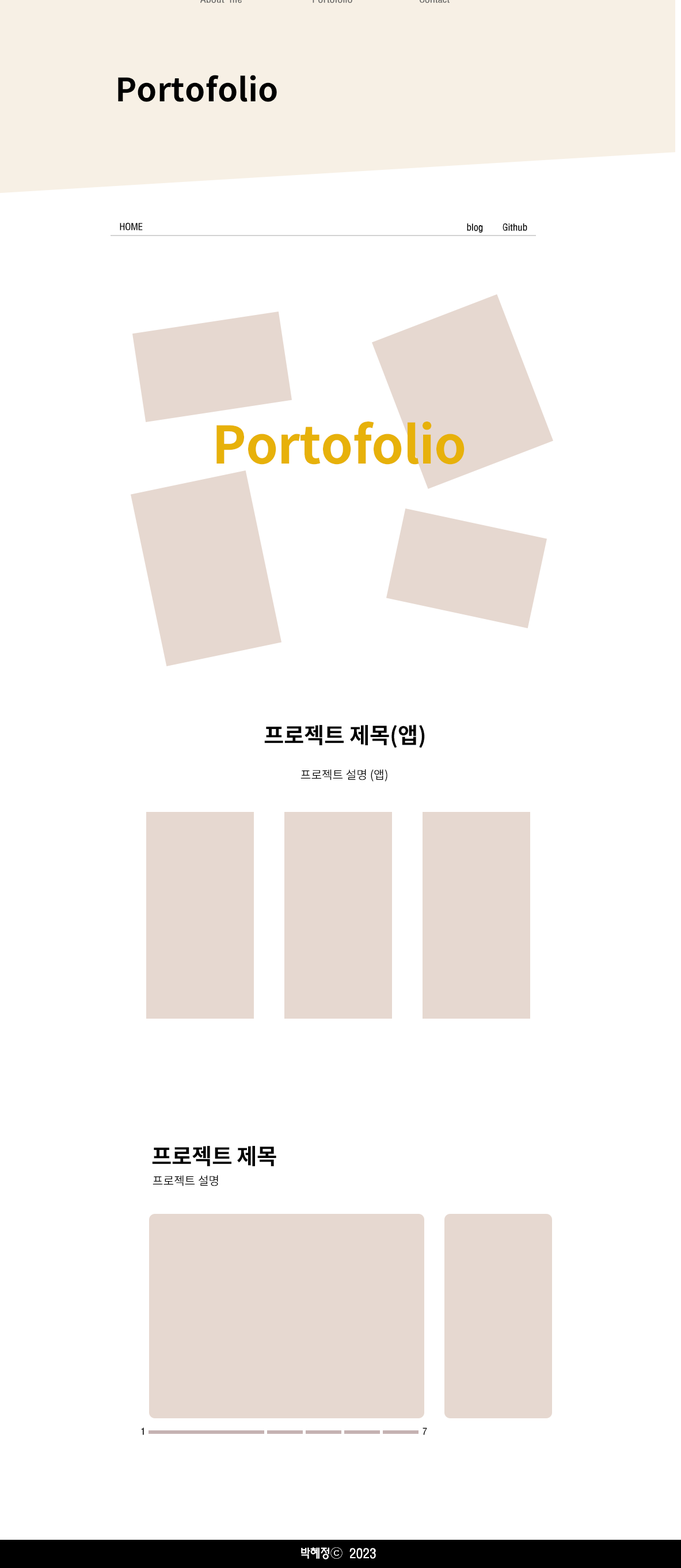
<style>
.page{position:relative;width:681px;height:1568px;background:#ffffff}
.page>*{position:absolute;margin:0}
.t1{font:32.3px "NotoSansKR-Bold";letter-spacing:0.005em;color:#000000}
.t2{font:8.9px "MoeumTR-HM";letter-spacing:-0.01em;color:#000000}
.t3{font:51.7px "NotoSansKR-Bold";letter-spacing:-0.01em;color:#e7b10a}
.t4{font:22.2px "NotoSansKR-Bold";letter-spacing:-0.01em;color:#000000}
.t5{font:11.8px "NotoSansKR-Regular";letter-spacing:-0.01em;color:#000000}
.t6{font:12.4px "MoeumTR-HM";letter-spacing:-0.01em;color:#ffffff}
</style>
<div class="page">
<p class="t1" style="left:118px;top:75px;width:159px;height:27px">Portofolio</p>
<p class="t2" style="left:120px;top:223px;width:23px;height:7px">HOME</p>
<p class="t2" style="left:467px;top:223px;width:60px;height:10px">blog    Github</p>
<p class="t3" style="left:217px;top:422px;width:248px;height:43px">Portofolio</p>
<p class="t4" style="left:264px;top:724px;width:161px;height:24px">프로젝트 제목(앱)</p>
<p class="t5" style="left:301px;top:769px;width:87px;height:12px">프로젝트　설명 (앱)</p>
<p class="t4" style="left:152px;top:1146px;width:124px;height:21px">프로젝트 제목</p>
<p class="t5" style="left:153px;top:1175px;width:65px;height:11px">프로젝트　설명</p>
<p class="t2" style="left:141px;top:1427px;width:3px;height:8px">1</p>
<p class="t2" style="left:423px;top:1427px;width:4px;height:8px">7</p>
<p class="t6" style="left:301px;top:1547px;width:75px;height:12px">박혜정ⓒ 2023</p>
</div>
